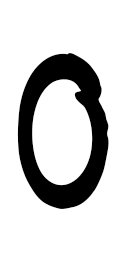
<style>
.page{position:relative;width:128px;height:256px;background:#ffffff}
.page>*{position:absolute;margin:0}
.t1{font:250px "AB-fudeshichi";letter-spacing:0.42em;color:#000000;scale:0.7 1}
</style>
<div class="page">
<p class="t1" style="left:17px;top:53px;width:92px;height:156px">O</p>
</div>
